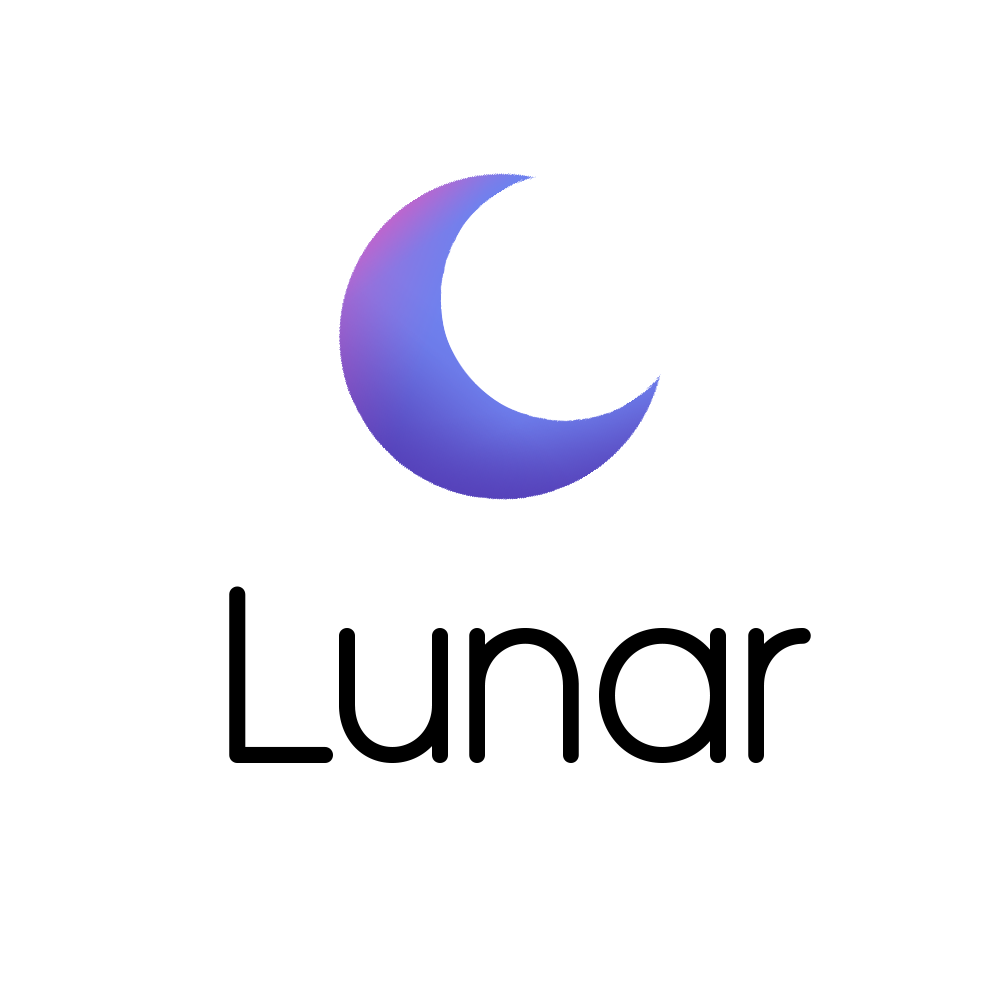
<style>
.page{position:relative;width:1000px;height:1000px;background:#ffffff}
.page>*{position:absolute;margin:0}
.t1{font:250px "Moon2.0-Regular";letter-spacing:0.02em;color:#000000}
</style>
<div class="page">
<p class="t1" style="left:229px;top:586px;width:582px;height:177px">Lunar</p>
</div>
